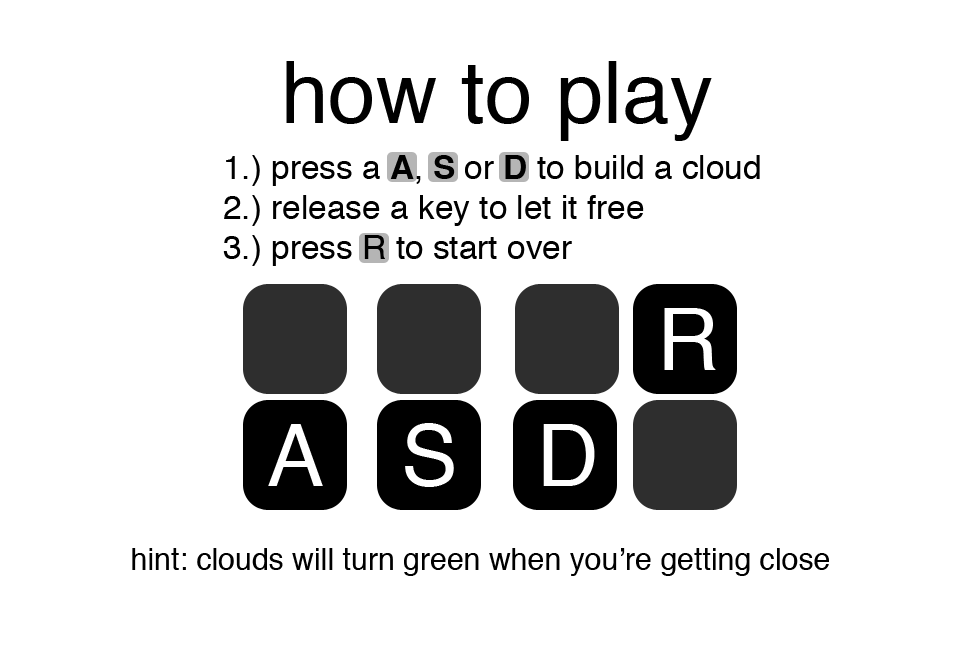
<style>
.page{position:relative;width:970px;height:650px;background:#ffffff}
.page>*{position:absolute;margin:0}
.t1{font:85.2px "Helvetica";color:#000000}
.t2{font:33.4px "Helvetica";color:#000000}
.t3{font:33.4px "Helvetica-Bold";color:#000000}
.t4{font:85.2px "Helvetica";color:#ffffff}
.t5{font:30.3px "Helvetica";color:#000000}
</style>
<div class="page">
<p class="t1" style="left:286px;top:61px;width:426px;height:80px">how to play</p>
<p class="t2" style="left:223px;top:155px;width:537px;height:111px">1.) press a <span class="t3">A</span>, <span class="t3">S</span> or <span class="t3">D</span> to build a cloud<br>2.) release a key to let it free<br>3.) press R to start over</p>
<p class="t4" style="left:664px;top:308px;width:52px;height:62px">R</p>
<p class="t4" style="left:268px;top:424px;width:55px;height:62px">A</p>
<p class="t4" style="left:405px;top:423px;width:49px;height:64px">S</p>
<p class="t4" style="left:543px;top:424px;width:52px;height:62px">D</p>
<p class="t5" style="left:132px;top:548px;width:697px;height:28px">hint: clouds will turn green when you’re getting close</p>
</div>
